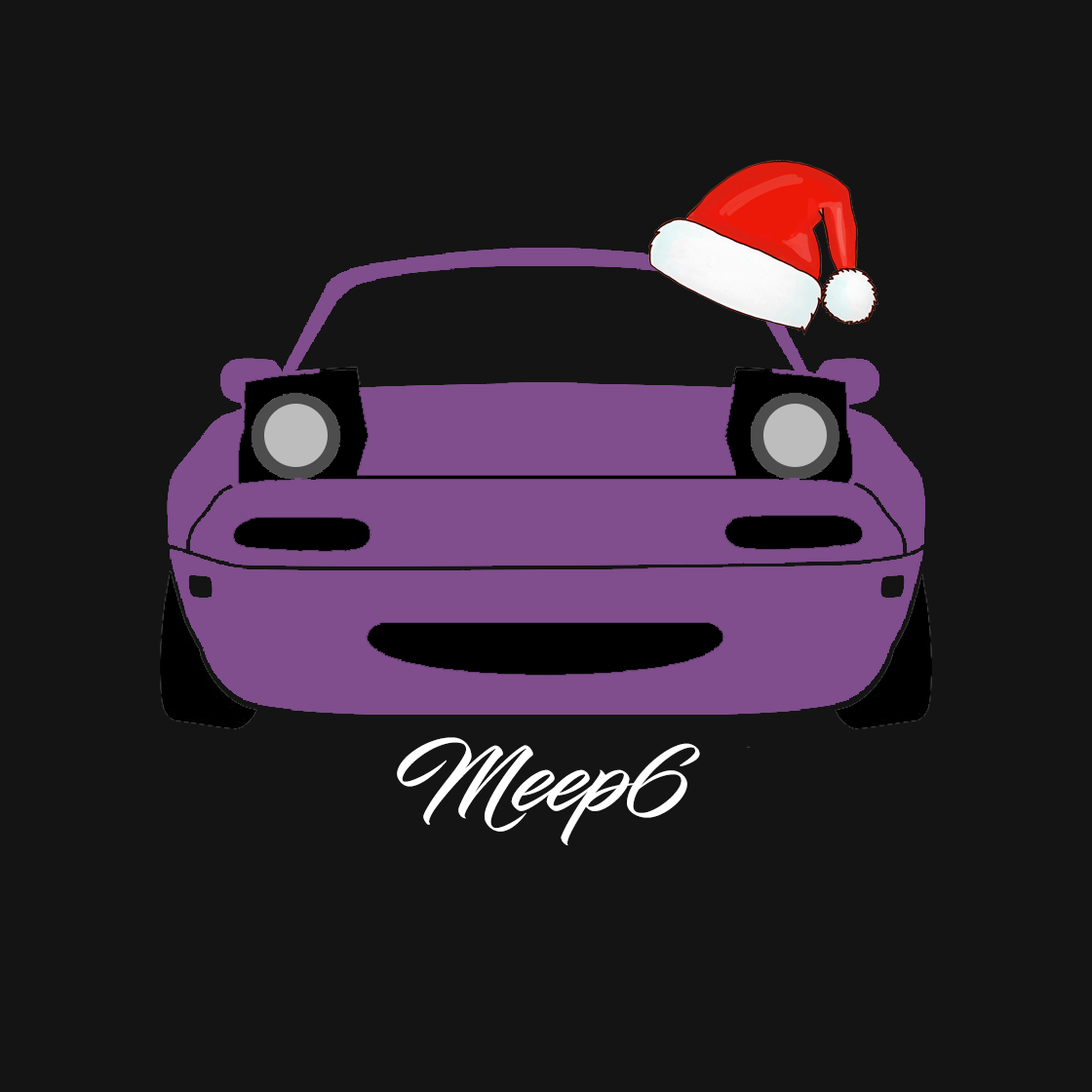
<style>
.page{position:relative;width:1092px;height:1092px;background:#141414}
.page>*{position:absolute;margin:0}
.t1{font:98.8px "InfiniteStroke-Condensed";color:#ffffff}
</style>
<div class="page">
<p class="t1" style="left:397px;top:737px;width:303px;height:108px">Meep6</p>
</div>
